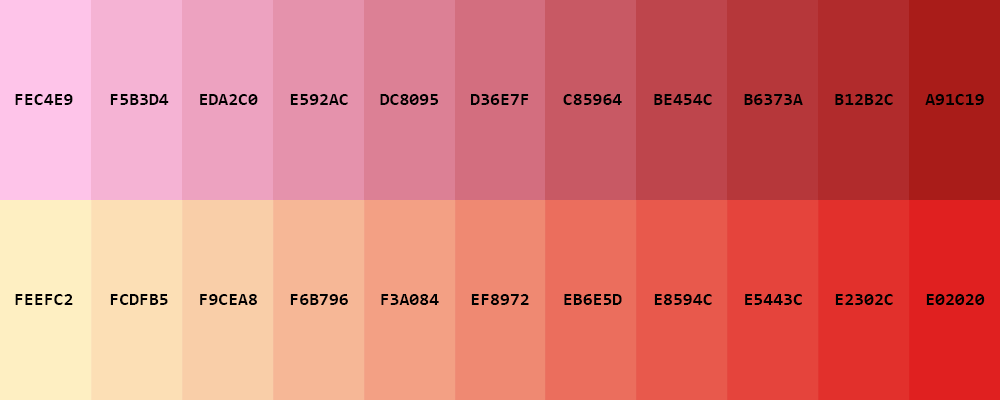
<style>
.page{position:relative;width:1000px;height:400px}
.page>*{position:absolute;margin:0}
.t1{font:18px "Consolas-Bold";color:#000000;text-transform:uppercase}
</style>
<div class="page">
<p class="t1" style="left:15px;top:94px;width:58px;height:11px">fec4e9</p>
<p class="t1" style="left:110px;top:94px;width:59px;height:11px">f5b3d4</p>
<p class="t1" style="left:200px;top:94px;width:58px;height:11px">eda2c0</p>
<p class="t1" style="left:290px;top:94px;width:58px;height:11px">e592ac</p>
<p class="t1" style="left:380px;top:94px;width:59px;height:11px">dc8095</p>
<p class="t1" style="left:471px;top:94px;width:58px;height:11px">d36e7f</p>
<p class="t1" style="left:563px;top:94px;width:59px;height:11px">c85964</p>
<p class="t1" style="left:654px;top:94px;width:58px;height:11px">be454c</p>
<p class="t1" style="left:744px;top:94px;width:59px;height:11px">b6373a</p>
<p class="t1" style="left:835px;top:94px;width:58px;height:11px">b12b2c</p>
<p class="t1" style="left:925px;top:94px;width:59px;height:11px">a91c19</p>
<p class="t1" style="left:15px;top:294px;width:58px;height:11px">feefc2</p>
<p class="t1" style="left:110px;top:294px;width:58px;height:11px">fcdfb5</p>
<p class="t1" style="left:200px;top:294px;width:57px;height:11px">f9cea8</p>
<p class="t1" style="left:290px;top:294px;width:58px;height:11px">f6b796</p>
<p class="t1" style="left:381px;top:294px;width:58px;height:11px">f3a084</p>
<p class="t1" style="left:471px;top:294px;width:58px;height:11px">ef8972</p>
<p class="t1" style="left:564px;top:294px;width:58px;height:11px">eb6e5d</p>
<p class="t1" style="left:654px;top:294px;width:58px;height:11px">e8594c</p>
<p class="t1" style="left:745px;top:294px;width:57px;height:11px">e5443c</p>
<p class="t1" style="left:835px;top:294px;width:58px;height:11px">e2302c</p>
<p class="t1" style="left:926px;top:294px;width:59px;height:11px">e02020</p>
</div>
